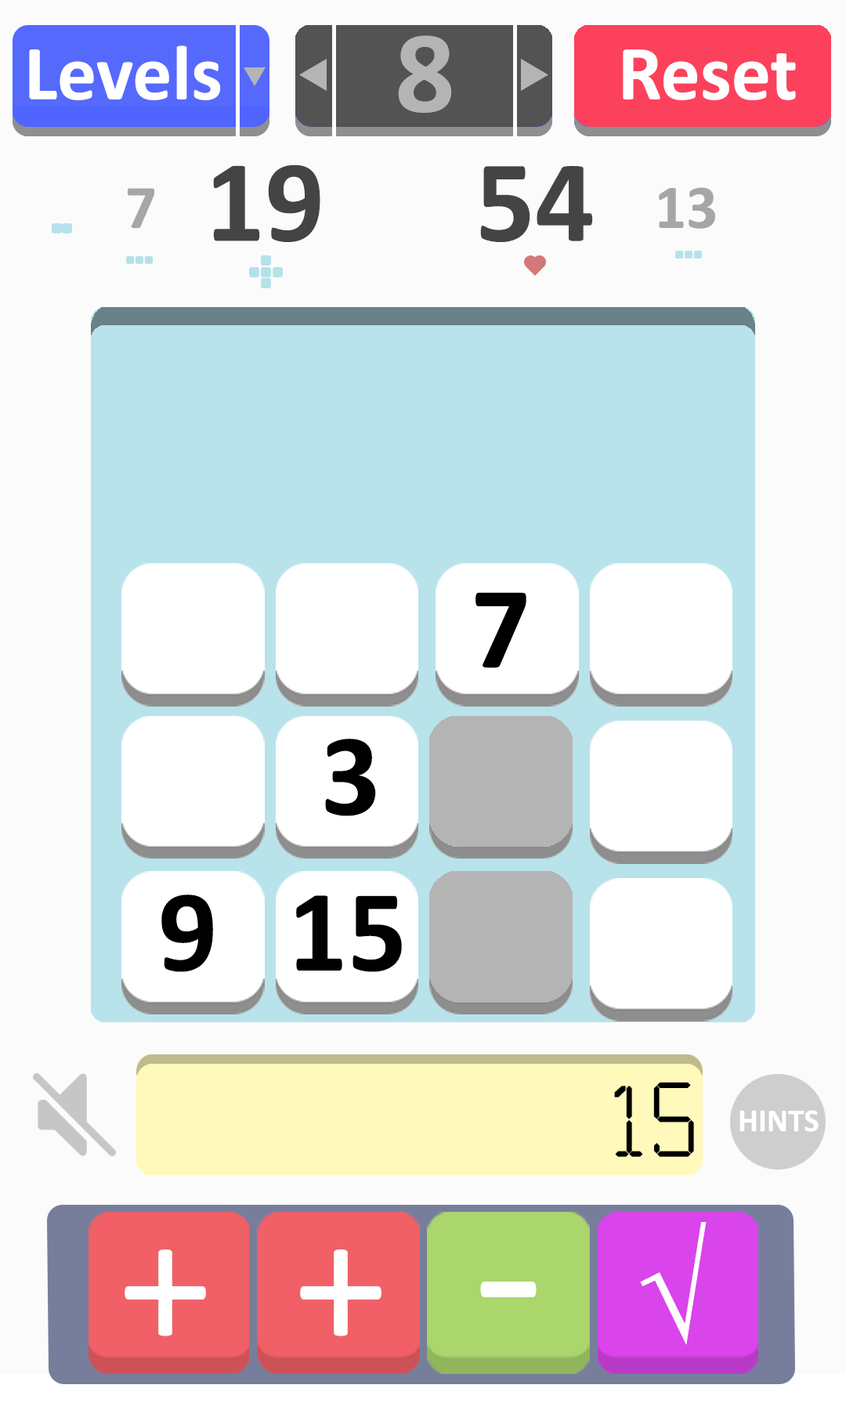
<style>
.page{position:relative;width:846px;height:1410px;background:#fbfbfb}
.page>*{position:absolute;margin:0}
.t1{font:117.6px "Calibri-Bold";color:#b4b4b4}
.t2{font:78.3px "Calibri-Bold";color:#ffffff}
.t3{font:117.6px "Calibri-Bold";color:#444444}
.t4{font:62.3px "Calibri-Bold";color:#a6a6a6}
.t5{font:117.6px "Calibri-Bold";color:#000000}
.t6{font:117.5px "Calculator";color:#000000}
.t7{font:128.7px "TimesNewRomanPSMT";color:#ffffff}
.t8{font:188.3px "Calibri";color:#ffffff}
.t9{font:231.5px "Calibri";color:#ffffff}
</style>
<div class="page">
<p class="t1" style="left:398px;top:35px;width:54px;height:78px">8</p>
<p class="t2" style="left:29px;top:45px;width:192px;height:55px">Levels</p>
<p class="t2" style="left:623px;top:49px;width:173px;height:51px">Reset</p>
<p class="t3" style="left:213px;top:164px;width:107px;height:78px">19</p>
<p class="t3" style="left:480px;top:165px;width:113px;height:77px">54</p>
<p class="t4" style="left:127px;top:188px;width:27px;height:41px">7</p>
<p class="t4" style="left:659px;top:187px;width:56px;height:42px">13</p>
<p class="t5" style="left:475px;top:592px;width:51px;height:76px">7</p>
<p class="t5" style="left:475px;top:592px;width:51px;height:76px">7</p>
<p class="t5" style="left:325px;top:739px;width:51px;height:77px">3</p>
<p class="t5" style="left:161px;top:894px;width:52px;height:78px">9</p>
<p class="t5" style="left:296px;top:895px;width:106px;height:77px">15</p>
<p class="t6" style="left:614px;top:1082px;width:80px;height:75px">15</p>
<p class="t7" style="left:640px;top:1222px;width:66px;height:123px">√</p>
<p class="t8" style="left:125px;top:1249px;width:81px;height:87px">+</p>
<p class="t8" style="left:300px;top:1249px;width:81px;height:87px">+</p>
<p class="t9" style="left:480px;top:1281px;width:56px;height:16px">-</p>
</div>
